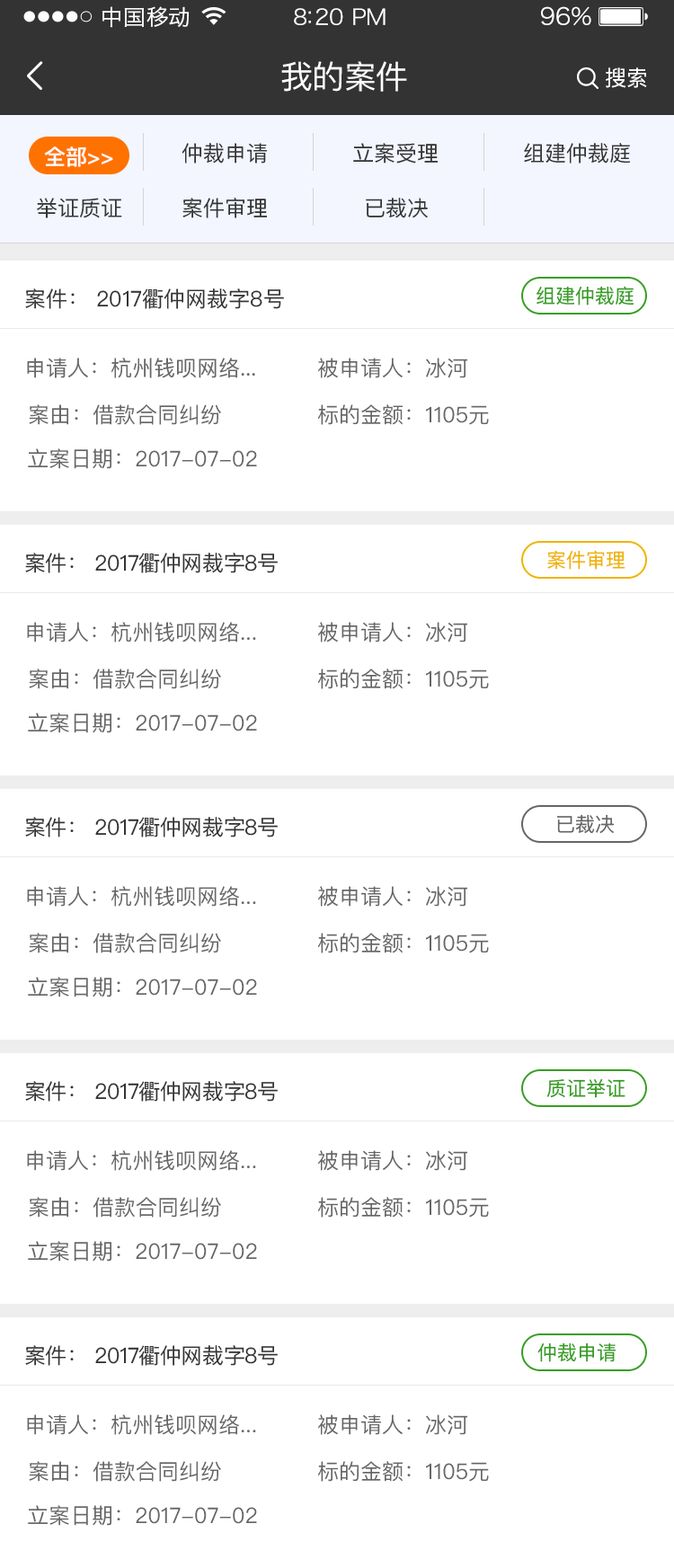
<style>
.page{position:relative;width:674px;height:1568px;background:#ffffff}
.page>*{position:absolute;margin:0}
.t1{font:21.6px "HiraginoSansGB-W3";letter-spacing:0.02em;color:#ffffff;scale:1.03 1}
.t2{font:21.6px "HiraginoSansGB-W3";letter-spacing:-0.02em;color:#ffffff;scale:1.03 1}
.t3{font:23.5px "HiraginoSansGB-W3";letter-spacing:-0.02em;color:#ffffff;scale:1.03 1}
.t4{font:32.3px "PingFangSC-Regular";letter-spacing:-0.02em;color:#ffffff}
.t5{font:21.6px "PingFangSC-Regular";letter-spacing:-0.02em;color:#ffffff}
.t6{font:21.6px "PingFangSC-Semibold";color:#ffffff}
.t7{font:21.6px "PingFangSC-Regular";color:#333333}
.t8{font:19.8px "PingFangSC-Regular";color:#379e23}
.t9{font:21.6px "PingFangSC-Regular";color:#666666}
.t10{font:21.6px "PingFangSC-Regular";letter-spacing:-0.02em;color:#333333}
.t11{font:19.8px "PingFangSC-Regular";color:#f0b300}
.t12{font:19.8px "PingFangSC-Regular";color:#666666}
</style>
<div class="page">
<p class="t1" style="left:102px;top:6px;width:88px;height:22px">中国移动</p>
<p class="t2" style="left:294px;top:8px;width:91px;height:17px">8:20 PM</p>
<p class="t3" style="left:541px;top:6px;width:50px;height:20px">96%</p>
<p class="t4" style="left:281px;top:61px;width:126px;height:31px">我的案件</p>
<p class="t5" style="left:606px;top:67px;width:41px;height:21px">搜索</p>
<p class="t6" style="left:44px;top:146px;width:69px;height:21px">全部&gt;&gt;</p>
<p class="t7" style="left:182px;top:143px;width:85px;height:21px">仲裁申请</p>
<p class="t7" style="left:353px;top:143px;width:85px;height:21px">立案受理</p>
<p class="t7" style="left:524px;top:143px;width:106px;height:21px">组建仲裁庭</p>
<p class="t7" style="left:37px;top:198px;width:85px;height:20px">举证质证</p>
<p class="t7" style="left:182px;top:198px;width:85px;height:20px">案件审理</p>
<p class="t7" style="left:366px;top:198px;width:62px;height:20px">已裁决</p>
<p class="t7" style="left:25px;top:288px;width:259px;height:21px">案件： 2017衢仲网裁字8号</p>
<p class="t8" style="left:536px;top:286px;width:98px;height:20px">组建仲裁庭</p>
<p class="t9" style="left:27px;top:358px;width:228px;height:20px">申请人：杭州钱呗网络...</p>
<p class="t9" style="left:318px;top:358px;width:149px;height:20px">被申请人：冰河</p>
<p class="t9" style="left:29px;top:404px;width:192px;height:21px">案由：借款合同纠纷</p>
<p class="t9" style="left:318px;top:404px;width:171px;height:21px">标的金额：1105元</p>
<p class="t9" style="left:28px;top:448px;width:229px;height:21px">立案日期：2017-07-02</p>
<p class="t10" style="left:25px;top:553px;width:253px;height:20px">案件： 2017衢仲网裁字8号</p>
<p class="t11" style="left:547px;top:550px;width:78px;height:20px">案件审理</p>
<p class="t9" style="left:27px;top:622px;width:229px;height:20px">申请人：杭州钱呗网络...</p>
<p class="t9" style="left:318px;top:622px;width:149px;height:20px">被申请人：冰河</p>
<p class="t9" style="left:29px;top:669px;width:192px;height:20px">案由：借款合同纠纷</p>
<p class="t9" style="left:318px;top:669px;width:171px;height:20px">标的金额：1105元</p>
<p class="t9" style="left:28px;top:713px;width:229px;height:20px">立案日期：2017-07-02</p>
<p class="t10" style="left:25px;top:817px;width:253px;height:20px">案件： 2017衢仲网裁字8号</p>
<p class="t12" style="left:557px;top:814px;width:58px;height:20px">已裁决</p>
<p class="t9" style="left:27px;top:886px;width:229px;height:21px">申请人：杭州钱呗网络...</p>
<p class="t9" style="left:318px;top:886px;width:149px;height:21px">被申请人：冰河</p>
<p class="t9" style="left:29px;top:933px;width:192px;height:20px">案由：借款合同纠纷</p>
<p class="t9" style="left:318px;top:933px;width:171px;height:20px">标的金额：1105元</p>
<p class="t9" style="left:28px;top:977px;width:229px;height:20px">立案日期：2017-07-02</p>
<p class="t10" style="left:25px;top:1081px;width:253px;height:21px">案件： 2017衢仲网裁字8号</p>
<p class="t8" style="left:546px;top:1078px;width:79px;height:20px">质证举证</p>
<p class="t9" style="left:27px;top:1150px;width:229px;height:21px">申请人：杭州钱呗网络...</p>
<p class="t9" style="left:318px;top:1150px;width:149px;height:21px">被申请人：冰河</p>
<p class="t9" style="left:29px;top:1197px;width:192px;height:21px">案由：借款合同纠纷</p>
<p class="t9" style="left:318px;top:1197px;width:171px;height:21px">标的金额：1105元</p>
<p class="t9" style="left:28px;top:1241px;width:229px;height:21px">立案日期：2017-07-02</p>
<p class="t10" style="left:25px;top:1345px;width:253px;height:21px">案件： 2017衢仲网裁字8号</p>
<p class="t8" style="left:537px;top:1342px;width:79px;height:20px">仲裁申请</p>
<p class="t9" style="left:27px;top:1414px;width:229px;height:21px">申请人：杭州钱呗网络...</p>
<p class="t9" style="left:318px;top:1414px;width:149px;height:21px">被申请人：冰河</p>
<p class="t9" style="left:29px;top:1461px;width:192px;height:21px">案由：借款合同纠纷</p>
<p class="t9" style="left:318px;top:1461px;width:171px;height:21px">标的金额：1105元</p>
<p class="t9" style="left:28px;top:1505px;width:229px;height:21px">立案日期：2017-07-02</p>
</div>
